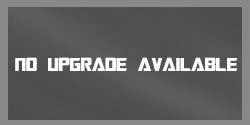
<style>
.page{position:relative;width:250px;height:125px}
.page>*{position:absolute;margin:0}
.t1{font:21px "TransformersMovie";color:#ffffff}
</style>
<div class="page">
<p class="t1" style="left:15px;top:57px;width:223px;height:14px">No Upgrade available</p>
</div>
